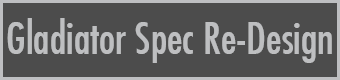
<style>
.page{position:relative;width:340px;height:80px;background:#4c4c4c}
.page>*{position:absolute;margin:0}
.t1{font:42.7px "FuturaCondensed";color:#bebfc1}
</style>
<div class="page">
<p class="t1" style="left:7px;top:18px;width:325px;height:45px">Gladiator Spec Re-Design</p>
</div>
